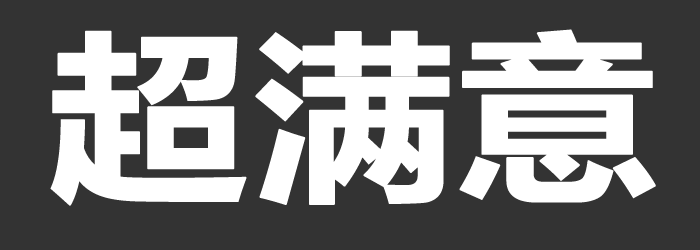
<style>
.page{position:relative;width:700px;height:250px;background:#333333}
.page>*{position:absolute;margin:0}
.t1{font:180px "MicrosoftYaHeiUI-Bold";letter-spacing:-0.005em;color:#ffffff;font-weight:bold;scale:1.11 1}
</style>
<div class="page">
<p class="t1" style="left:50px;top:29px;width:606px;height:177px">超满意</p>
</div>
